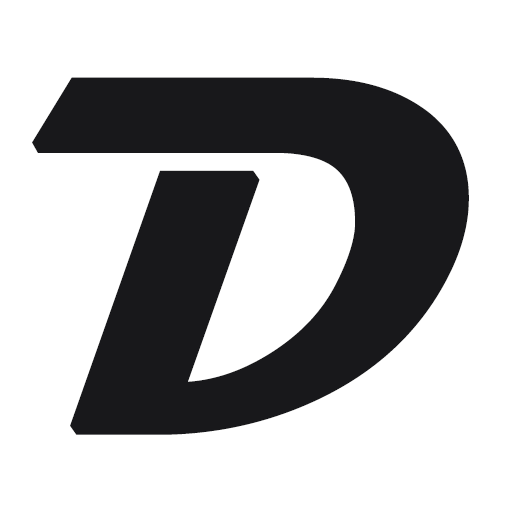
<style>
.page{position:relative;width:512px;height:512px;background:#ffffff}
.page>*{position:absolute;margin:0}
.t1{font:500px "Magneto-Bold";letter-spacing:0.01em;color:#18181b;font-weight:bold}
</style>
<div class="page">
<p class="t1" style="left:32px;top:77px;width:437px;height:358px">D</p>
</div>
